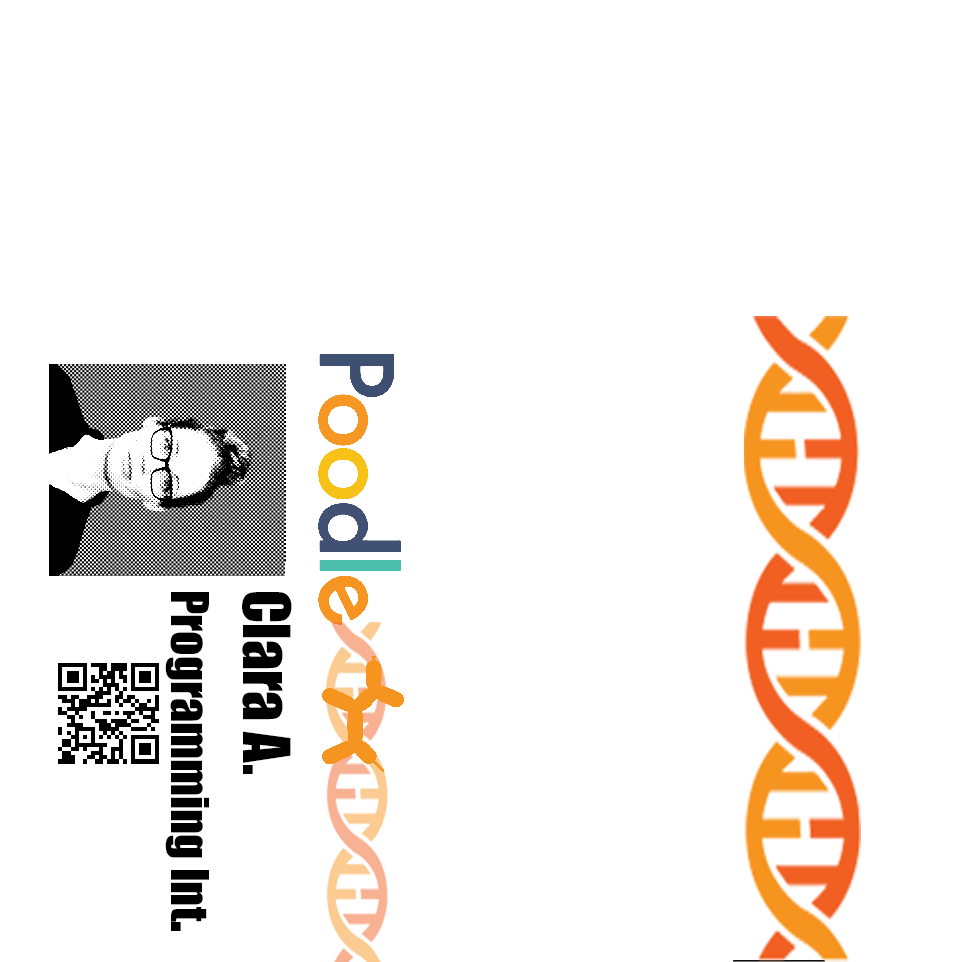
<style>
.page{position:relative;width:960px;height:962px;background:#ffffff}
.page>*{position:absolute;margin:0}
.t1{font:48px "Impact";color:#000000}
.t2{font:60px "Impact";color:#000000}
</style>
<div class="page">
<p class="t1" style="left:165px;top:592px;width:127px;height:339px;rotate:90deg"><span class="t2">Clara A.<br></span>Programming Int<span class="t2">.</span></p>
</div>
